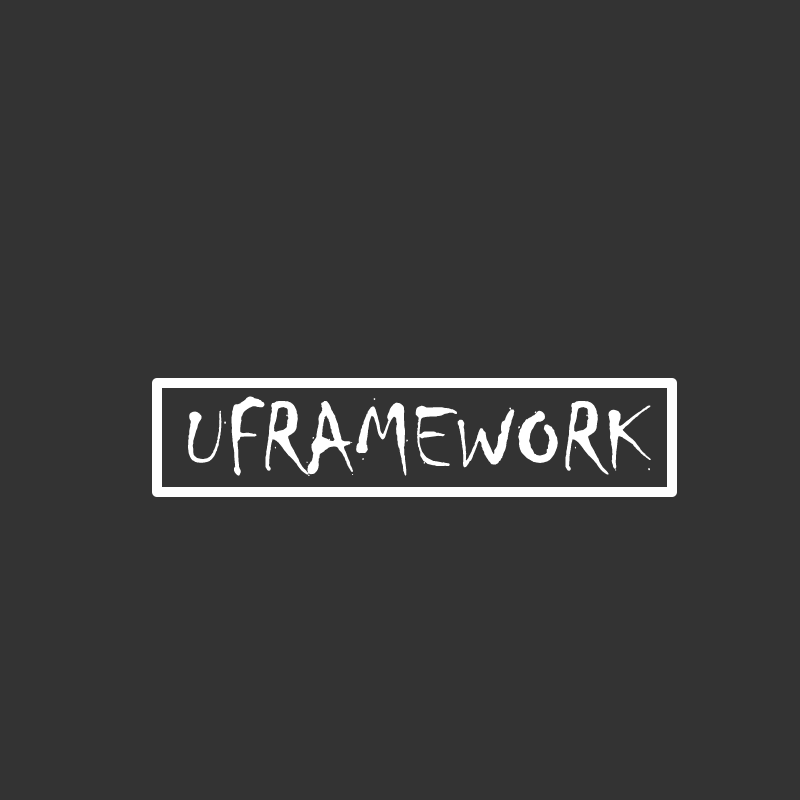
<style>
.page{position:relative;width:800px;height:800px;background:#333333}
.page>*{position:absolute;margin:0}
.t1{font:100px "Chiller-Regular";color:#ffffff}
</style>
<div class="page">
<p class="t1" style="left:188px;top:396px;width:463px;height:80px">UFRAMEWORK</p>
</div>
